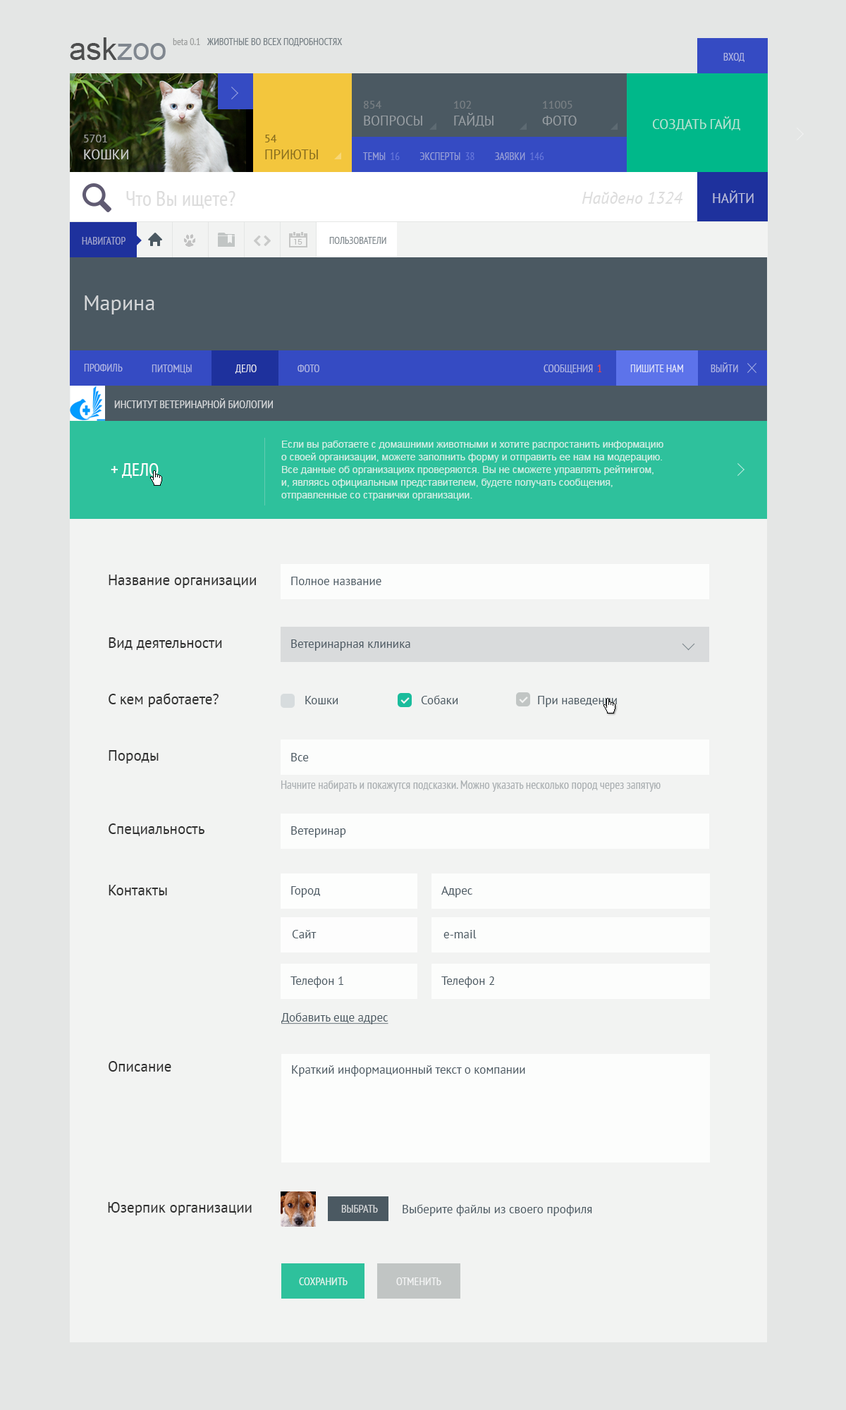
<style>
.page{position:relative;width:846px;height:1410px;background:#f2f3f2}
.page>*{position:absolute;margin:0}
.t1{font:10.6px "PTSans-Narrow";color:#aeb4e2;text-transform:uppercase}
.t2{font:10.6px "PTSans-Narrow";color:#9ea3cd;text-transform:uppercase}
.t3{font:9.9px "PTSans-Narrow";color:#7b848a;text-transform:uppercase}
.t4{font:21.1px "PTSans-Regular";color:#d4d6d8}
.t5{font:10.6px "PTSans-Narrow";color:#dfe0ed;text-transform:uppercase}
.t6{font:10.6px "PTSans-Narrow";color:#fd482e;text-transform:uppercase}
.t7{font:10.6px "PTSans-Narrow";color:#dfe3fa;text-transform:uppercase}
.t8{font:11.3px "PTSans-Narrow";color:#d4d6d8;text-transform:uppercase}
.t9{font:9.9px/12.7px "ArialMT";color:#d0eee4}
.t10{font:18.3px "PTSans-Narrow";color:#ffffff;text-transform:uppercase}
.t11{font:14.8px "PTSans-Regular";color:#313131}
.t12{font:12px "PTSans-Regular";color:#4b5962}
.t13{font:12px "PTSans-Narrow";color:#abb0b3}
.t14{font:12px "PTSans-Regular";color:#4b5962;text-decoration:underline}
.t15{font:11.3px "PTSans-Narrow";color:#e0f3ed;text-transform:uppercase}
.t16{font:11.3px "PTSans-Narrow";color:#ffffff;text-transform:uppercase}
</style>
<div class="page">
<p class="t1" style="left:723px;top:53px;width:21px;height:9px">вход</p>
<p class="t2" style="left:82px;top:237px;width:43px;height:8px">навигатор</p>
<p class="t3" style="left:329px;top:237px;width:57px;height:7px">пользователи</p>
<p class="t4" style="left:85px;top:295px;width:69px;height:19px">Марина</p>
<p class="t1" style="left:84px;top:364px;width:39px;height:7px">профиль</p>
<p class="t1" style="left:152px;top:364px;width:40px;height:10px">питомцы</p>
<p class="t5" style="left:235px;top:364px;width:22px;height:10px">дело</p>
<p class="t1" style="left:297px;top:364px;width:22px;height:8px">фото</p>
<p class="t1" style="left:543px;top:364px;width:50px;height:10px">сообщения</p>
<p class="t6" style="left:597px;top:364px;width:4px;height:8px">1</p>
<p class="t7" style="left:630px;top:364px;width:53px;height:8px">пишите нам</p>
<p class="t1" style="left:711px;top:362px;width:27px;height:10px">выйти</p>
<p class="t8" style="left:114px;top:398px;width:159px;height:10px">Институт ветеринарной биологии</p>
<p class="t9" style="left:281px;top:441px;width:382px;height:59px">Если вы работаете с домашними животными и хотите распростанить информацию о своей организации, можете заполнить форму и отправить ее нам на модерацию. Все данные об организациях проверяются. Вы не сможете управлять рейтингом, и, являясь официальным представителем, будете получать сообщения, отправленные со странички организации.</p>
<p class="t10" style="left:111px;top:463px;width:48px;height:15px">+ дело</p>
<p class="t11" style="left:109px;top:574px;width:147px;height:14px">Название организации</p>
<p class="t12" style="left:291px;top:577px;width:90px;height:8px">Полное название</p>
<p class="t11" style="left:109px;top:637px;width:113px;height:13px">Вид деятельности</p>
<p class="t12" style="left:291px;top:639px;width:119px;height:12px">Ветеринарная клиника</p>
<p class="t11" style="left:109px;top:693px;width:110px;height:14px">С кем работаете?</p>
<p class="t12" style="left:305px;top:696px;width:33px;height:8px">Кошки</p>
<p class="t12" style="left:421px;top:695px;width:37px;height:9px">Собаки</p>
<p class="t12" style="left:538px;top:696px;width:79px;height:11px">При наведении</p>
<p class="t11" style="left:109px;top:750px;width:50px;height:13px">Породы</p>
<p class="t12" style="left:291px;top:753px;width:18px;height:8px">Все</p>
<p class="t13" style="left:281px;top:780px;width:379px;height:12px">Начните набирать и покажутся подсказки. Можно указать несколько пород через запятую</p>
<p class="t11" style="left:109px;top:823px;width:95px;height:13px">Специальность</p>
<p class="t12" style="left:291px;top:826px;width:55px;height:11px">Ветеринар</p>
<p class="t11" style="left:109px;top:885px;width:58px;height:10px">Контакты</p>
<p class="t12" style="left:291px;top:886px;width:29px;height:11px">Город</p>
<p class="t12" style="left:441px;top:886px;width:31px;height:11px">Адрес</p>
<p class="t12" style="left:292px;top:930px;width:24px;height:8px">Сайт</p>
<p class="t12" style="left:443px;top:930px;width:33px;height:8px">e-mail</p>
<p class="t12" style="left:290px;top:976px;width:53px;height:12px">Телефон 1</p>
<p class="t12" style="left:441px;top:976px;width:53px;height:12px">Телефон 2</p>
<p class="t14" style="left:281px;top:1012px;width:107px;height:12px">Добавить еще адрес</p>
<p class="t11" style="left:109px;top:1061px;width:62px;height:10px">Описание</p>
<p class="t12" style="left:292px;top:1065px;width:233px;height:11px">Краткий информационный текст о компании</p>
<p class="t11" style="left:108px;top:1202px;width:144px;height:13px">Юзерпик организации</p>
<p class="t8" style="left:341px;top:1205px;width:37px;height:7px">Выбрать</p>
<p class="t12" style="left:402px;top:1204px;width:190px;height:12px">Выберите файлы из своего профиля</p>
<p class="t15" style="left:299px;top:1277px;width:49px;height:8px">сохранить</p>
<p class="t16" style="left:396px;top:1277px;width:45px;height:8px;opacity:0.8">отменить</p>
</div>
